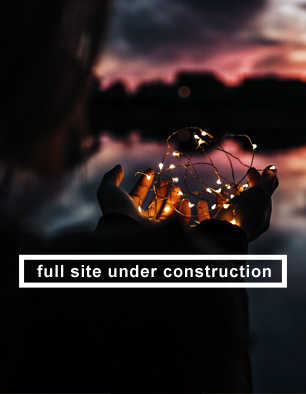
<style>
.page{position:relative;width:306px;height:394px}
.page>*{position:absolute;margin:0}
.t1{font:16.5px "Arial-BoldMT";letter-spacing:0.05em;color:#ffffff}
</style>
<div class="page">
<p class="t1" style="left:37px;top:264px;width:234px;height:14px">full site under construction</p>
</div>
